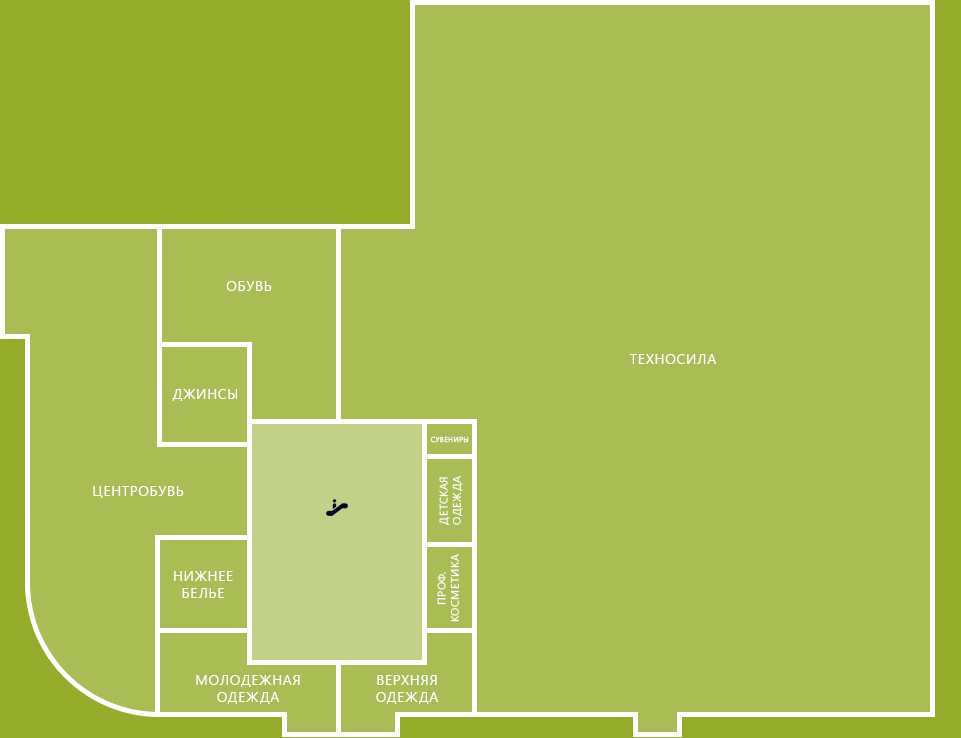
<style>
.page{position:relative;width:961px;height:738px;background:#a9bd54}
.page>*{position:absolute;margin:0}
.t1{font:14px "SegoeUI";letter-spacing:0.05em;color:#ffffff;text-transform:uppercase}
.t2{font:7px "SegoeUI";letter-spacing:0.05em;color:#ffffff;text-transform:uppercase}
.t3{font:11px "SegoeUI";letter-spacing:0.05em;color:#ffffff;text-transform:uppercase}
</style>
<div class="page">
<p class="t1" style="left:226px;top:281px;width:46px;height:10px">Обувь</p>
<p class="t1" style="left:629px;top:354px;width:88px;height:10px">Техносила</p>
<p class="t1" style="left:172px;top:389px;width:65px;height:12px">Джинсы</p>
<p class="t2" style="left:430px;top:436px;width:39px;height:7px">Сувениры</p>
<p class="t1" style="left:93px;top:486px;width:91px;height:12px">Центробувь</p>
<p class="t3" style="left:439px;top:476px;width:24px;height:49px;text-align:center;rotate:-90deg">Детская<br>одежда</p>
<p class="t3" style="left:437px;top:554px;width:22px;height:68px;text-align:center;rotate:-90deg">Проф.<br>косметика</p>
<p class="t1" style="left:174px;top:571px;width:59px;height:27px;text-align:center">Нижнее<br>белье</p>
<p class="t1" style="left:196px;top:675px;width:104px;height:29px;text-align:center">Молодежная<br>одежда</p>
<p class="t1" style="left:376px;top:675px;width:63px;height:29px;text-align:center">Верхняя<br>одежда</p>
</div>
